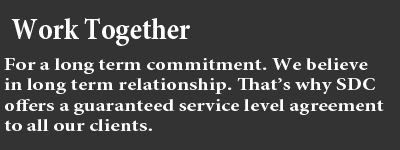
<style>
.page{position:relative;width:400px;height:150px;background:#333333}
.page>*{position:absolute;margin:0}
.t1{font:30px "MinionPro-BoldCn";color:#ffffff}
.t2{font:17px "MinionPro-BoldCn";color:#ffffff;scale:1.34 1}
</style>
<div class="page">
<p class="t1" style="left:11px;top:18px;width:179px;height:28px">Work Together</p>
<p class="t2" style="left:4px;top:58px;width:380px;height:73px">For a long term commitment. We believe <br>in long term relationship. That’s why SDC<br>offers a guaranteed service level agreement<br>to all our clients.</p>
</div>
